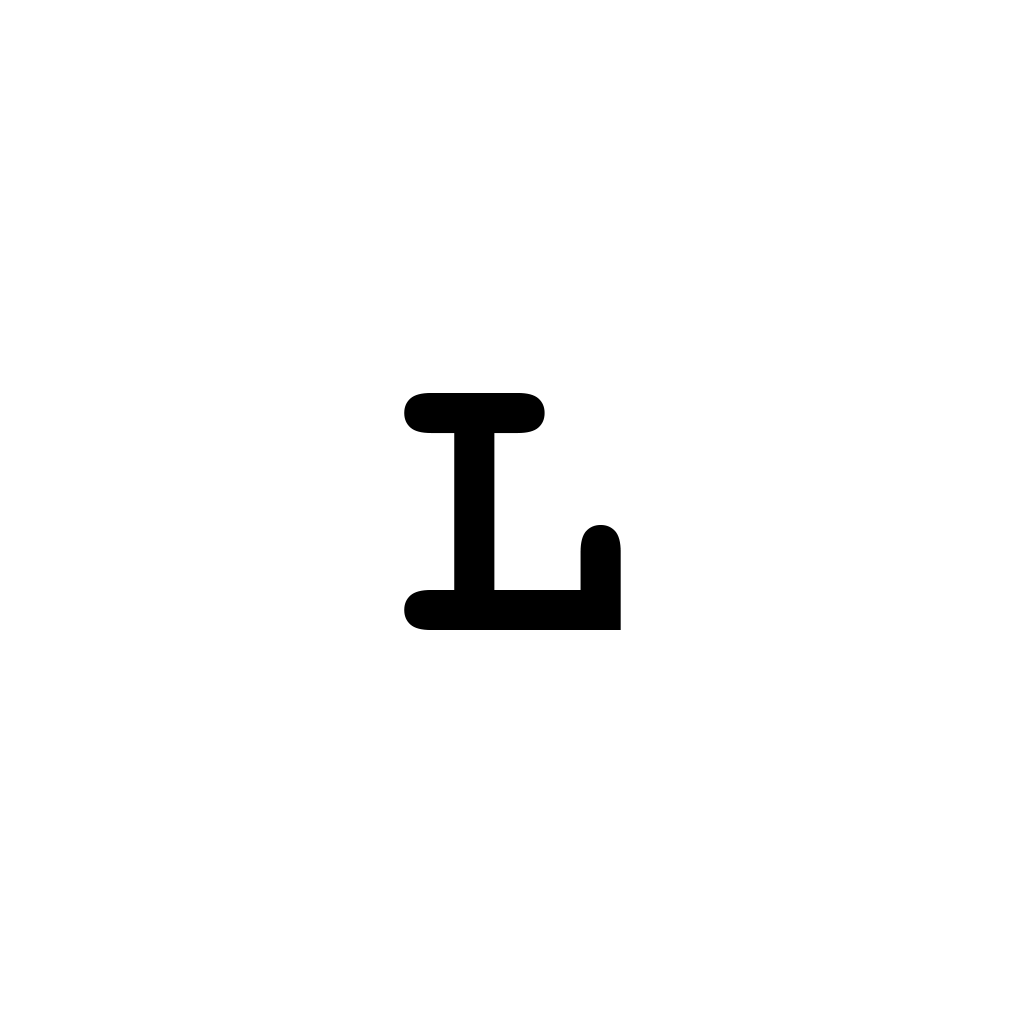
<style>
.page{position:relative;width:1024px;height:1024px;background:#ffffff}
.page>*{position:absolute;margin:0}
.t1{font:400px "CourierNewPS-BoldMT";color:#000000}
</style>
<div class="page">
<p class="t1" style="left:404px;top:393px;width:217px;height:237px">L</p>
</div>
